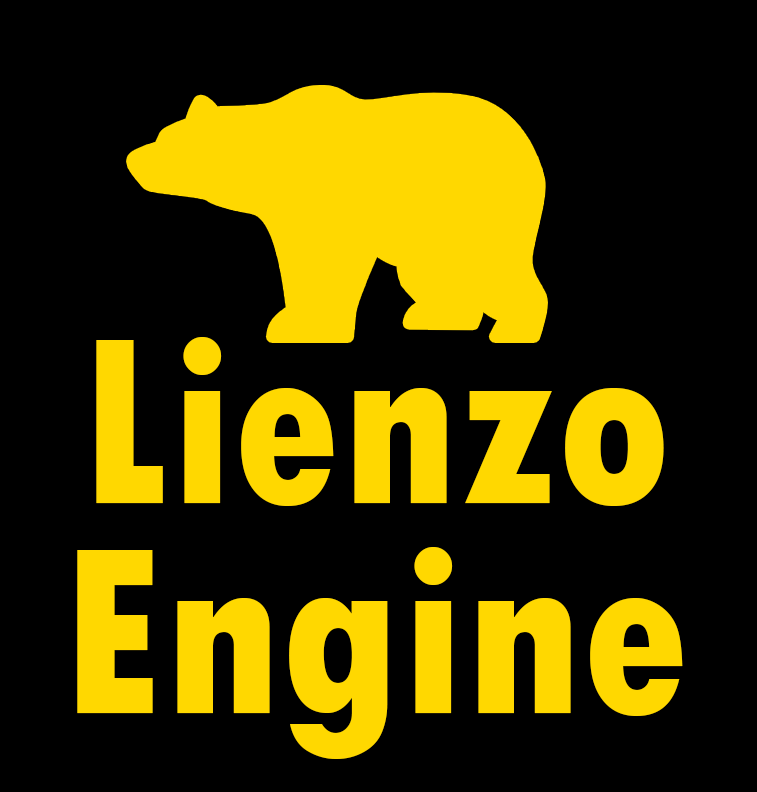
<style>
.page{position:relative;width:757px;height:792px;background:#000000}
.page>*{position:absolute;margin:0}
.t1{font:250px/210px "TwCenMT-CondensedExtraBold";color:#ffd800}
</style>
<div class="page">
<p class="t1" style="left:77px;top:337px;width:606px;height:422px;text-align:center">Lienzo<br>Engine</p>
</div>
